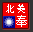
<style>
.page{position:relative;width:33px;height:32px;background:#f20000}
.page>*{position:absolute;margin:0}
.t1{font:10.4px "SimSun";color:#ffffff}
.t2{font:11.7px "SimSun";color:#ffffff}
</style>
<div class="page">
<p class="t1" style="left:6px;top:4px;width:19px;height:9px">北美</p>
<p class="t2" style="left:16px;top:15px;width:11px;height:12px">奉</p>
</div>
